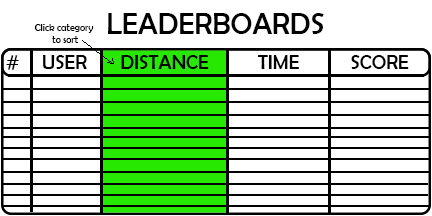
<style>
.page{position:relative;width:432px;height:216px;background:#ffffff}
.page>*{position:absolute;margin:0}
.t1{font:30px "BerlinSansFB-Reg";color:#000000}
.t2{font:10px "BerlinSansFB-Reg";color:#000000}
.t3{font:20px "BerlinSansFB-Reg";color:#000000}
</style>
<div class="page">
<p class="t1" style="left:108px;top:13px;width:216px;height:21px">LEADERBOARDS</p>
<p class="t2" style="left:34px;top:24px;width:60px;height:19px;text-align:center">Click category<br> to sort</p>
<p class="t3" style="left:6px;top:55px;width:13px;height:15px">#</p>
<p class="t3" style="left:42px;top:55px;width:45px;height:14px">USER</p>
<p class="t3" style="left:121px;top:55px;width:88px;height:14px">DISTANCE</p>
<p class="t3" style="left:257px;top:55px;width:42px;height:14px">TIME</p>
<p class="t3" style="left:351px;top:55px;width:58px;height:14px">SCORE</p>
</div>
